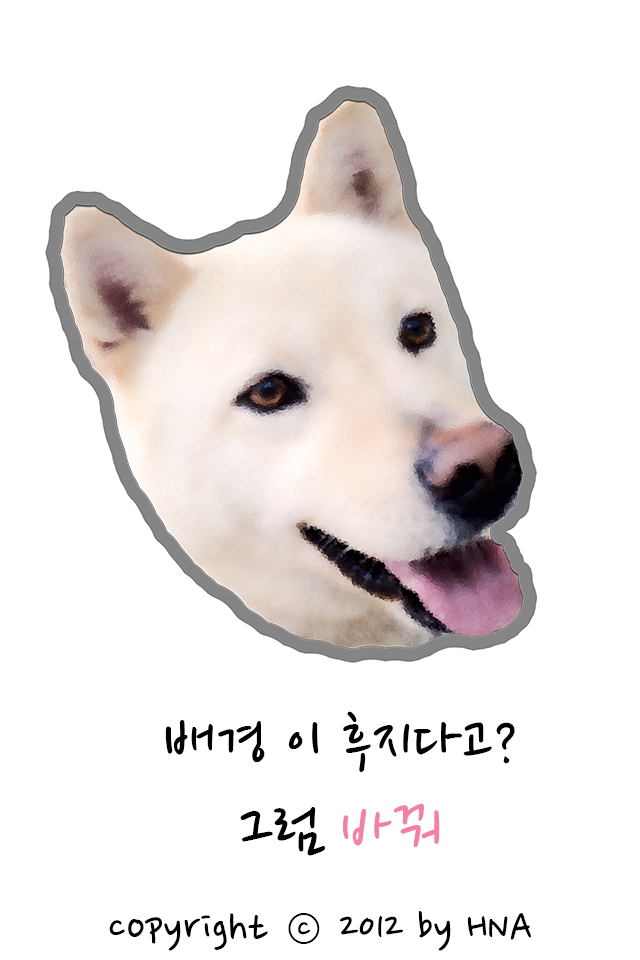
<style>
.page{position:relative;width:640px;height:960px;background:#ffffff}
.page>*{position:absolute;margin:0}
.t1{font:72px "NanumPen";color:#000000}
.t2{font:72px "NanumPen";color:#f281a3}
.t3{font:48px "NanumPen";color:#000000}
</style>
<div class="page">
<p class="t1" style="left:165px;top:711px;width:350px;height:145px;text-align:center">배경 이 후지다고?<br>그럼 <span class="t2">바꿔</span></p>
<p class="t3" style="left:109px;top:911px;width:422px;height:40px">copyright ⓒ 2012 by HNA</p>
</div>
